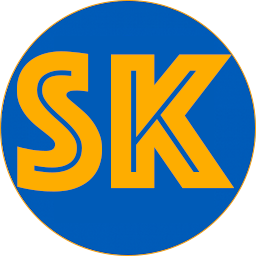
<style>
.page{position:relative;width:256px;height:256px;background:#fead00}
.page>*{position:absolute;margin:0}
.t1{font:200px "Phosphate-Inline";color:#fead00}
</style>
<div class="page">
<p class="t1" style="left:17px;top:51px;width:217px;height:141px">SK</p>
</div>
